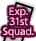
<style>
.page{position:relative;width:36px;height:41px;background:#ffffff}
.page>*{position:absolute;margin:0}
.t1{font:9px/10px "UDShinGoPro-Light";color:#ffb9dd;font-weight:bold}
</style>
<div class="page">
<p class="t1" style="left:2px;top:7px;width:32px;height:31px;text-align:center">Exp.<br>31st<br>Squad.</p>
</div>
